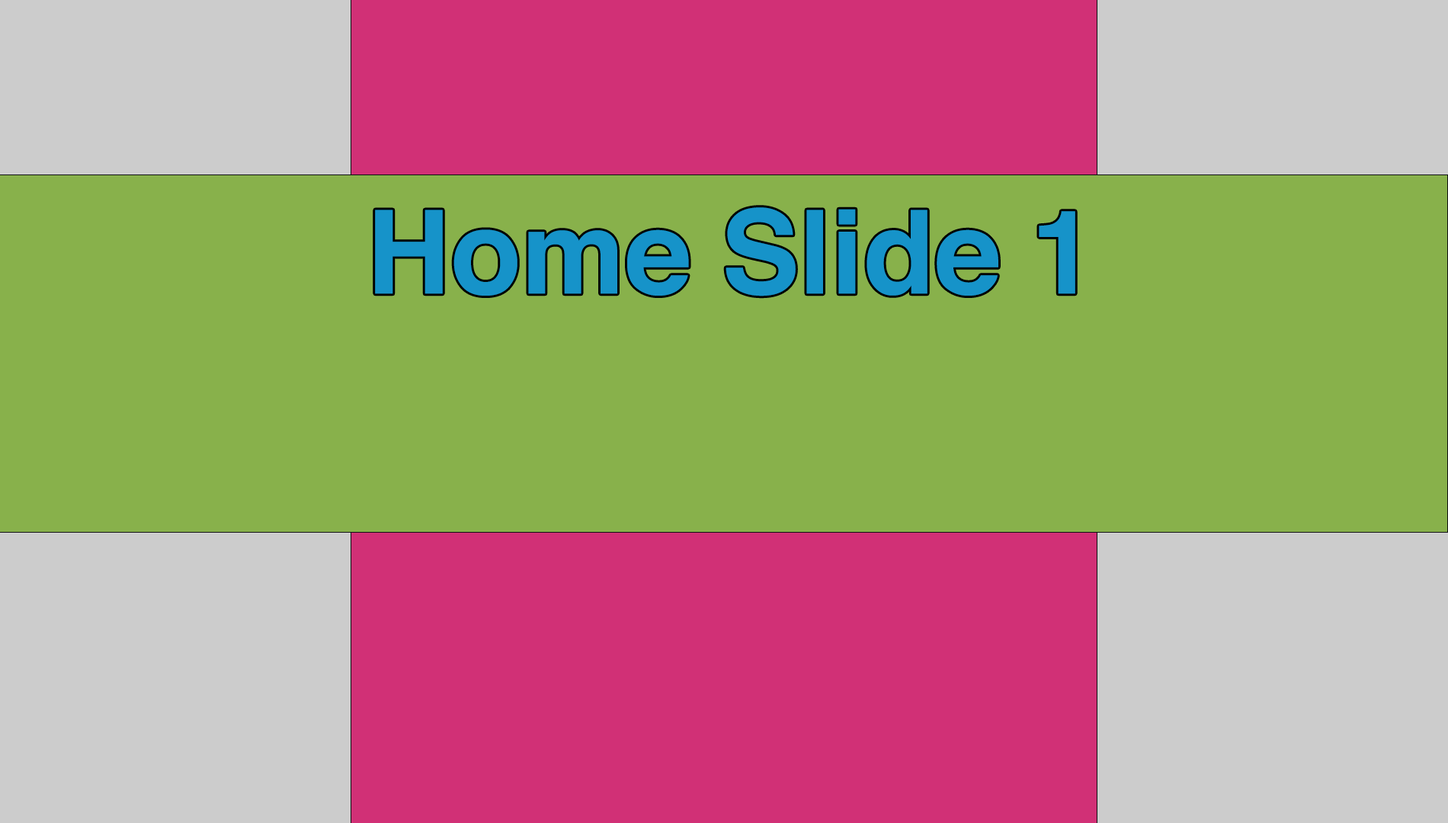
<style>
.page{position:relative;width:1448px;height:823px;background:#88b14b}
.page>*{position:absolute;margin:0}
.t1{font:116.2px "Helvetica-Bold";color:#1693c9}
</style>
<div class="page">
<p class="t1" style="left:375px;top:207px;width:701px;height:90px">Home Slide 1</p>
</div>
